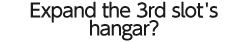
<style>
.page{position:relative;width:249px;height:42px;background:#ffffff}
.page>*{position:absolute;margin:0}
.t1{font:19px/18px "UDShinGoPro-Medium";letter-spacing:-0.04em;color:#1b1b1b}
</style>
<div class="page">
<p class="t1" style="left:30px;top:1px;width:188px;height:40px;text-align:center">Expand the 3rd slot's<br>hangar?</p>
</div>
